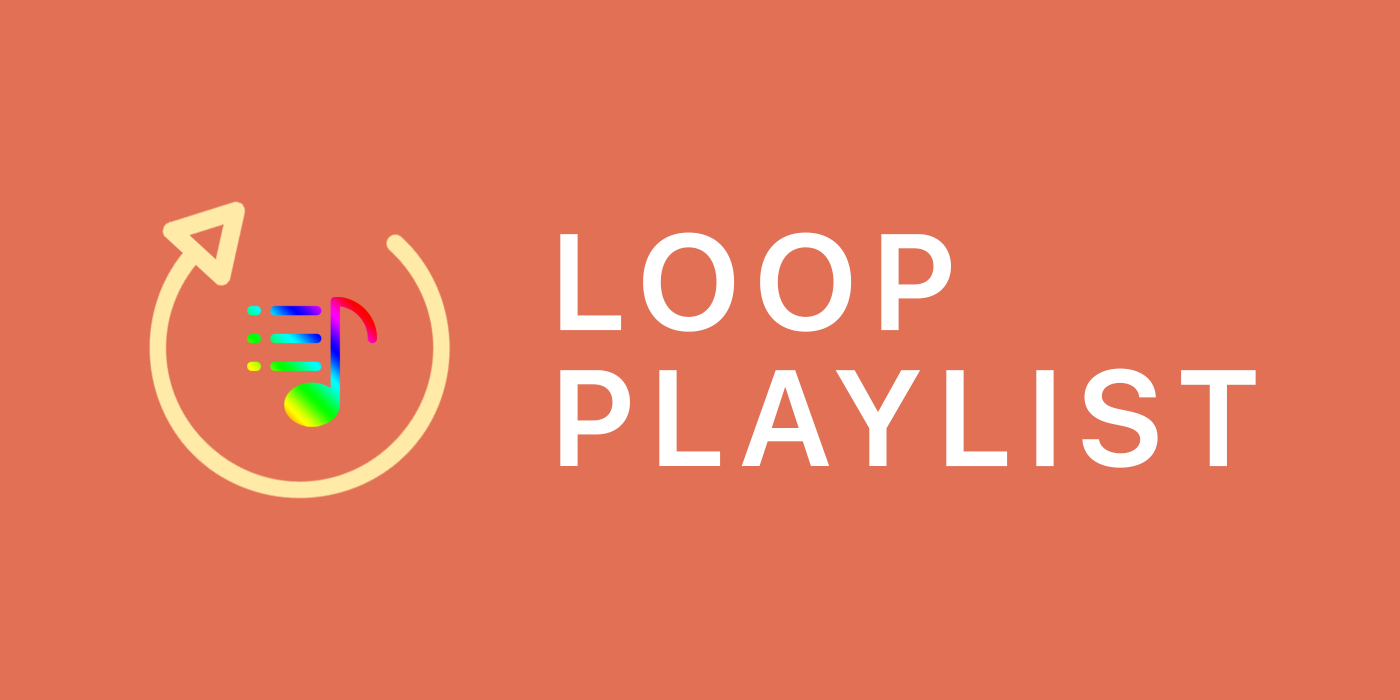
<style>
.page{position:relative;width:1400px;height:700px;background:#e17055}
.page>*{position:absolute;margin:0}
.t1{font:135.9px/135.9px "SFProDisplay-Semibold";letter-spacing:0.12em;color:#ffffff}
</style>
<div class="page">
<p class="t1" style="left:560px;top:232px;width:696px;height:236px">LOOP<br>PLAYLIST</p>
</div>
